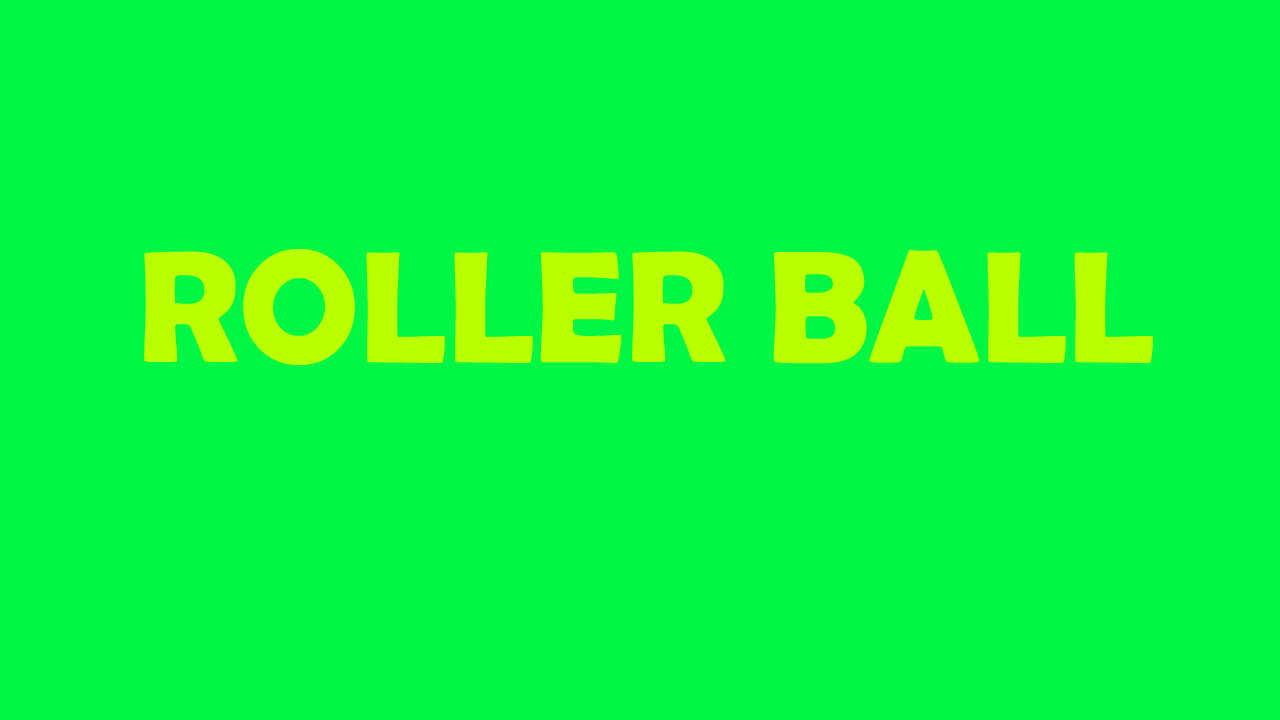
<style>
.page{position:relative;width:1280px;height:720px;background:#00f645}
.page>*{position:absolute;margin:0}
.t1{font:160px "BerlinSansFBDemi-Bold";color:#baff00}
.t2{font:108px "ArialMT";color:#00ff4e}
</style>
<div class="page">
<p class="t1" style="left:144px;top:249px;width:1009px;height:116px"><span class="t2"><br></span>ROLLER BALL</p>
</div>
